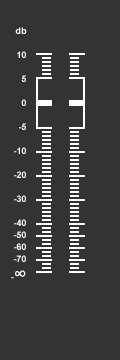
<style>
.page{position:relative;width:120px;height:360px;background:#333333}
.page>*{position:absolute;margin:0}
.t1{font:9px/12px "Arial-BoldMT";color:#ffffff}
.t2{font:9px/18px "Arial-BoldMT";color:#ffffff}
.t3{font:18px/18px "Arial-BoldMT";color:#ffffff}
</style>
<div class="page">
<p class="t1" style="left:11px;top:27px;width:16px;height:252px;text-align:right">db<br><br>10<br><br> 5<br><br>0<br><br>-5<br><br>-10<br><br>-20<br><br>-30<br><br>-40<br>-50<br>-60<br>-70<br><span class="t2">-</span><span class="t3">∞</span></p>
</div>
